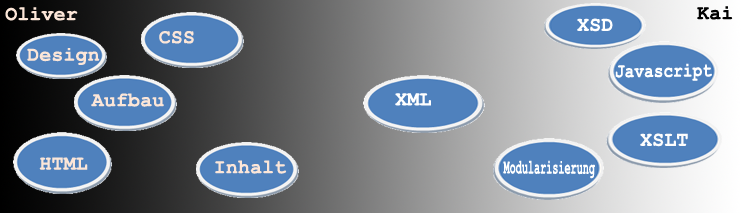
<style>
.page{position:relative;width:741px;height:213px}
.page>*{position:absolute;margin:0}
.t1{font:20px "CourierNewPS-BoldMT";letter-spacing:0.005em;color:#000000}
.t2{font:20px "CourierNewPS-BoldMT";letter-spacing:0.005em;color:#fce6d8}
.t3{font:20px "CourierNewPS-BoldMT";letter-spacing:0.005em;color:#ffffff}
.t4{font:20px "CourierNewPS-BoldMT";letter-spacing:0.005em;color:#ffffff;scale:0.8 1}
.t5{font:20px "CourierNewPS-BoldMT";letter-spacing:0.005em;color:#fdfdfd}
.t6{font:20px "CourierNewPS-BoldMT";letter-spacing:0.005em;color:#ffffff;scale:0.5 1}
</style>
<div class="page">
<p class="t1" style="left:697px;top:6px;width:36px;height:14px">Kai</p>
<p class="t2" style="left:5px;top:7px;width:73px;height:14px">Oliver</p>
<p class="t3" style="left:577px;top:18px;width:36px;height:14px">XSD</p>
<p class="t2" style="left:159px;top:31px;width:35px;height:13px">CSS</p>
<p class="t2" style="left:27px;top:48px;width:73px;height:17px">Design</p>
<p class="t4" style="left:615px;top:63px;width:97px;height:18px;rotate:-1deg">Javascript</p>
<p class="t2" style="left:91px;top:93px;width:73px;height:14px">Aufbau</p>
<p class="t3" style="left:395px;top:93px;width:36px;height:13px">XML</p>
<p class="t5" style="left:640px;top:133px;width:48px;height:14px">XSLT</p>
<p class="t2" style="left:39px;top:157px;width:49px;height:13px">HTML</p>
<p class="t2" style="left:215px;top:160px;width:72px;height:14px">Inhalt</p>
<p class="t6" style="left:503px;top:160px;width:92px;height:19px">Modularisierung</p>
</div>
